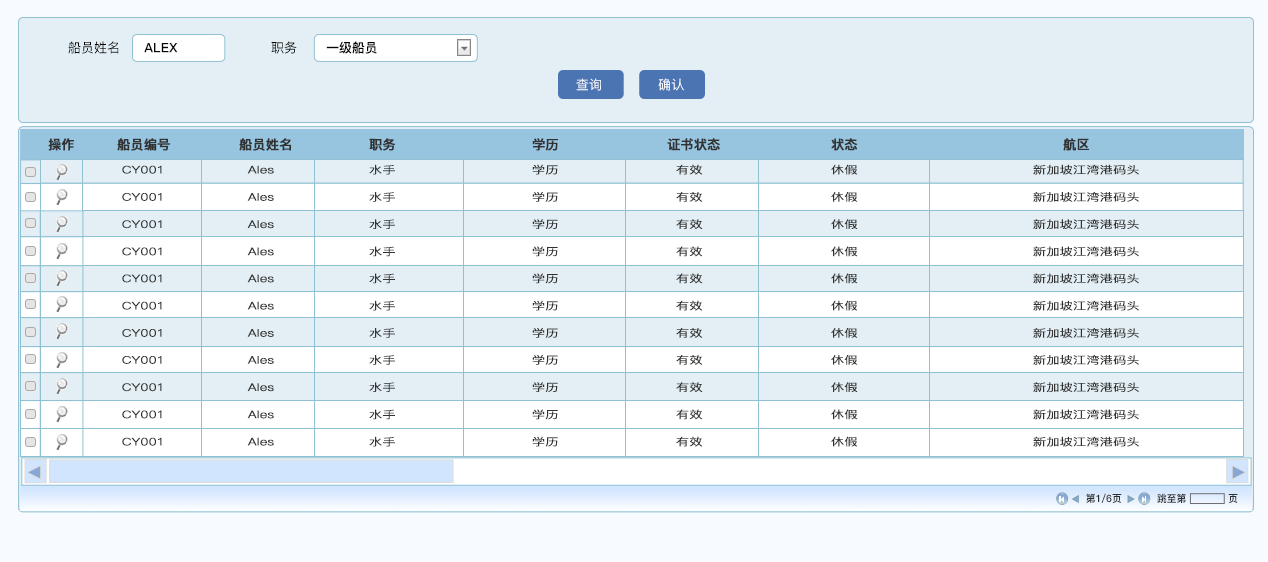
<style>
.page{position:relative;width:1268px;height:562px;background:#e3eff4}
.page>*{position:absolute;margin:0}
.t1{font:13.2px "PingFang-SC-Medium";color:#050505}
.t2{font:13px "PingFang-SC-Heavy";color:#050505}
.t3{font:13.2px "PingFang-SC-Medium";color:#ffffff}
.t4{font:13px "PingFang-SC-Bold";color:#323232;font-weight:bold}
.t5{font:10.4px/13.6px "PingFang-SC-Regular";color:#323232;font-weight:bold;scale:1.26 1}
.t6{font:10px "PingFang-SC-Heavy";color:#2d2e2e}
</style>
<div class="page">
<p class="t1" style="left:68px;top:41px;width:51px;height:13px">船员姓名</p>
<p class="t1" style="left:271px;top:41px;width:26px;height:13px">职务</p>
<p class="t2" style="left:326px;top:41px;width:51px;height:13px">一级船员</p>
<p class="t2" style="left:144px;top:43px;width:34px;height:10px">ALEX</p>
<p class="t3" style="left:576px;top:78px;width:25px;height:13px">查询</p>
<p class="t3" style="left:658px;top:78px;width:26px;height:13px">确认</p>
<p class="t4" style="left:48px;top:138px;width:26px;height:13px">操作</p>
<p class="t4" style="left:117px;top:138px;width:53px;height:13px">船员编号</p>
<p class="t4" style="left:239px;top:138px;width:52px;height:13px">船员姓名</p>
<p class="t4" style="left:369px;top:138px;width:27px;height:13px">职务</p>
<p class="t4" style="left:532px;top:138px;width:26px;height:13px">学历</p>
<p class="t4" style="left:667px;top:138px;width:53px;height:13px">证书状态</p>
<p class="t4" style="left:831px;top:138px;width:27px;height:13px">状态</p>
<p class="t4" style="left:1063px;top:138px;width:26px;height:13px">航区</p>
<p class="t5" style="left:122px;top:165px;width:40px;height:281px">CY001<br><br>CY001<br><br>CY001<br><br>CY001<br><br>CY001<br><br>CY001<br><br>CY001<br><br>CY001<br><br>CY001<br><br>CY001<br><br>CY001</p>
<p class="t5" style="left:247px;top:165px;width:27px;height:281px">Ales<br><br>Ales<br><br>Ales<br><br>Ales<br><br>Ales<br><br>Ales<br><br>Ales<br><br>Ales<br><br>Ales<br><br>Ales<br><br>Ales</p>
<p class="t5" style="left:369px;top:164px;width:26px;height:283px">水手<br><br>水手<br><br>水手<br><br>水手<br><br>水手<br><br>水手<br><br>水手<br><br>水手<br><br>水手<br><br>水手<br><br>水手</p>
<p class="t5" style="left:532px;top:164px;width:26px;height:283px">学历<br><br>学历<br><br>学历<br><br>学历<br><br>学历<br><br>学历<br><br>学历<br><br>学历<br><br>学历<br><br>学历<br><br>学历</p>
<p class="t5" style="left:676px;top:164px;width:27px;height:283px">有效<br><br>有效<br><br>有效<br><br>有效<br><br>有效<br><br>有效<br><br>有效<br><br>有效<br><br>有效<br><br>有效<br><br>有效</p>
<p class="t5" style="left:831px;top:164px;width:27px;height:283px">休假<br><br>休假<br><br>休假<br><br>休假<br><br>休假<br><br>休假<br><br>休假<br><br>休假<br><br>休假<br><br>休假<br><br>休假</p>
<p class="t5" style="left:1033px;top:164px;width:106px;height:283px">新加坡江湾港码头<br><br>新加坡江湾港码头<br><br>新加坡江湾港码头<br><br>新加坡江湾港码头<br><br>新加坡江湾港码头<br><br>新加坡江湾港码头<br><br>新加坡江湾港码头<br><br>新加坡江湾港码头<br><br>新加坡江湾港码头<br><br>新加坡江湾港码头<br><br>新加坡江湾港码头</p>
<p class="t6" style="left:1086px;top:493px;width:36px;height:10px">第1/6页</p>
<p class="t6" style="left:1157px;top:493px;width:81px;height:10px">跳至第             页</p>
</div>
